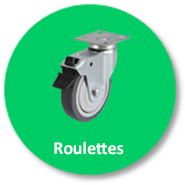
<style>
.page{position:relative;width:185px;height:185px;background:#00cc66}
.page>*{position:absolute;margin:0}
.t1{font:18px "Calibri-Bold";color:#ffffff}
</style>
<div class="page">
<p class="t1" style="left:54px;top:141px;width:70px;height:14px">Roulettes</p>
</div>
